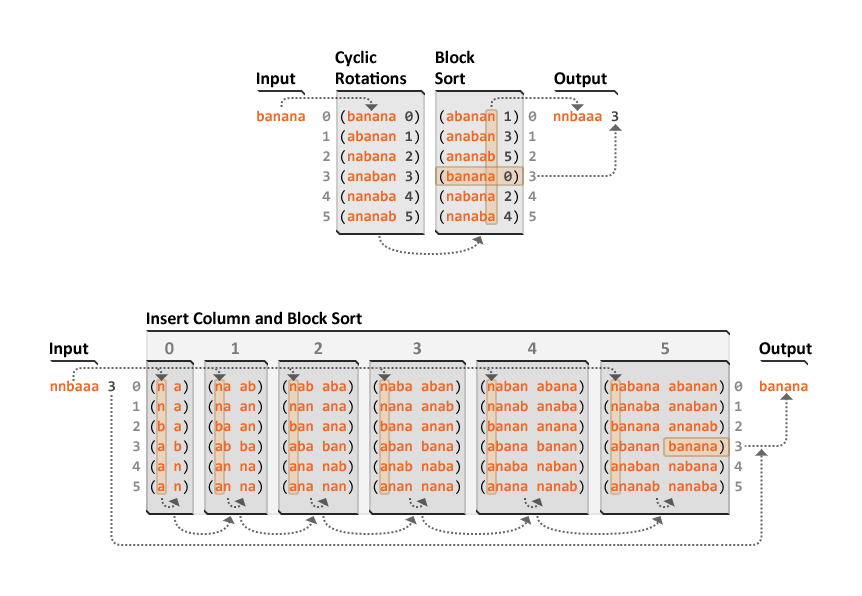
<style>
.page{position:relative;width:862px;height:596px;background:#ffffff}
.page>*{position:absolute;margin:0}
.t1{font:18px "Calibri-Bold";color:#000000}
.t2{font:15px/20px "Consolas-Bold";color:#898989}
.t3{font:15px/20px "Consolas-Bold";color:#f26522}
.t4{font:15px/20px "Consolas";color:#000000}
.t5{font:15px/20px "Consolas-Bold";color:#464646}
.t6{font:18px "Calibri-Bold";color:#797979}
</style>
<div class="page">
<p class="t1" style="left:335px;top:50px;width:72px;height:35px">Cyclic<br>Rotations</p>
<p class="t1" style="left:435px;top:50px;width:40px;height:35px">Block<br>Sort</p>
<p class="t1" style="left:257px;top:72px;width:39px;height:16px">Input</p>
<p class="t1" style="left:554px;top:72px;width:53px;height:16px">Output</p>
<p class="t2" style="left:257px;top:110px;width:362px;height:115px"><span class="t3">banana</span>  0 <span class="t4">(</span><span class="t3">banana </span><span class="t5">0</span><span class="t4">)  (</span><span class="t3">abanan</span><span class="t5"> 1</span><span class="t4">) </span>0  <span class="t3">nnbaaa </span><span class="t5">3<br></span>        1 <span class="t4">(</span><span class="t3">abanan </span><span class="t5">1</span><span class="t4">)  (</span><span class="t3">anaban </span><span class="t5">3</span><span class="t4">) </span>1<br>        2 <span class="t4">(</span><span class="t3">nabana </span><span class="t5">2</span><span class="t4">)  (</span><span class="t3">ananab </span><span class="t5">5</span><span class="t4">) </span>2<br>        3 <span class="t4">(</span><span class="t3">anaban </span><span class="t5">3</span><span class="t4">)  (</span><span class="t3">banana </span><span class="t5">0</span><span class="t4">) </span>3<br>        4 <span class="t4">(</span><span class="t3">nanaba </span><span class="t5">4</span><span class="t4">)  (</span><span class="t3">nabana</span><span class="t5"> 2</span><span class="t4">) </span>4<br>        5 <span class="t4">(</span><span class="t3">ananab </span><span class="t5">5</span><span class="t4">)  (</span><span class="t3">nanaba </span><span class="t5">4</span><span class="t4">) </span>5</p>
<p class="t1" style="left:147px;top:311px;width:215px;height:14px">Insert Column and Block Sort</p>
<p class="t1" style="left:50px;top:342px;width:39px;height:16px">Input</p>
<p class="t6" style="left:165px;top:342px;width:9px;height:13px">0</p>
<p class="t6" style="left:232px;top:342px;width:7px;height:12px">1</p>
<p class="t6" style="left:314px;top:342px;width:9px;height:12px">2</p>
<p class="t6" style="left:413px;top:342px;width:8px;height:13px">3</p>
<p class="t6" style="left:528px;top:342px;width:9px;height:12px">4</p>
<p class="t6" style="left:661px;top:342px;width:8px;height:13px">5</p>
<p class="t1" style="left:759px;top:342px;width:53px;height:16px">Output</p>
<p class="t3" style="left:50px;top:380px;width:758px;height:115px">nnbaaa <span class="t5">3</span><span class="t2">  0 </span><span class="t4">(</span>n a<span class="t4">)  (</span>na ab<span class="t4">)  (</span>nab aba<span class="t4">)  (</span>naba aban<span class="t4">)  (</span>naban abana<span class="t4">)  (</span>nabana abanan<span class="t4">) </span><span class="t2">0  </span>banana<br><span class="t2">          1 </span><span class="t4">(</span>n a<span class="t4">)  (</span>na an<span class="t4">)  (</span>nan ana<span class="t4">)  (</span>nana anab<span class="t4">)  (</span>nanab anaba<span class="t4">)  (</span>nanaba anaban<span class="t4">) </span><span class="t2">1<br>          2 </span><span class="t4">(</span>b a<span class="t4">)  (</span>ba an<span class="t4">)  (</span>ban ana<span class="t4">)  (</span>bana anan<span class="t4">)  (</span>banan anana<span class="t4">)  (</span>banana ananab<span class="t4">) </span><span class="t2">2<br>          3 </span><span class="t4">(</span>a b<span class="t4">)  (</span>ab ba<span class="t4">)  (</span>aba ban<span class="t4">)  (</span>aban bana<span class="t4">)  (</span>abana banan<span class="t4">)  (</span>abanan banana<span class="t4">) </span><span class="t2">3<br>          4 </span><span class="t4">(</span>a n<span class="t4">)  (</span>an na<span class="t4">)  (</span>ana nab<span class="t4">)  (</span>anab naba<span class="t4">)  (</span>anaba naban<span class="t4">)  (</span>anaban nabana<span class="t4">) </span><span class="t2">4<br>          5 </span><span class="t4">(</span>a n<span class="t4">)  (</span>an na<span class="t4">)  (</span>ana nan<span class="t4">)  (</span>anan nana<span class="t4">)  (</span>anana nanab<span class="t4">)  (</span>ananab nanaba<span class="t4">) </span><span class="t2">5</span></p>
</div>
